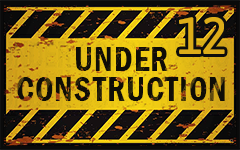
<style>
.page{position:relative;width:240px;height:150px}
.page>*{position:absolute;margin:0}
.t1{font:52.4px "Asap-Medium";letter-spacing:-0.05em;color:#ddad19;scale:0.94 1}
.t2{font:35.6px/30.2px "FranklinGothic-DemiCond";letter-spacing:0.025em;color:#0f0d07;scale:0.94 1}
</style>
<div class="page">
<p class="t1" style="left:179px;top:17px;width:46px;height:37px">12</p>
<p class="t2" style="left:17px;top:47px;width:208px;height:54px;text-align:center">UNDER<br>CONSTRUCTION</p>
</div>
